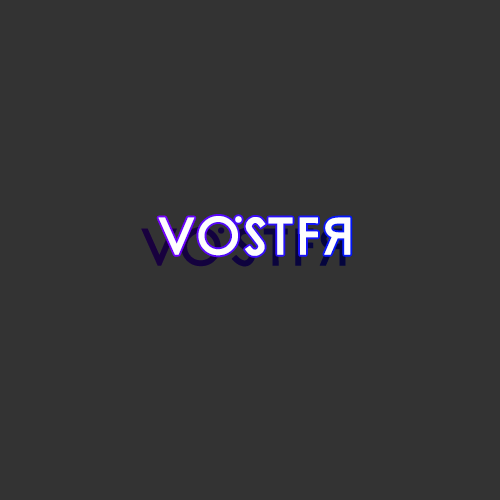
<style>
.page{position:relative;width:500px;height:500px;background:#333333}
.page>*{position:absolute;margin:0}
.t1{font:45.8px "FoundationLogo";letter-spacing:-0.25em;color:#fefefe;font-weight:bold}
</style>
<div class="page">
<p class="t1" style="left:158px;top:216px;width:193px;height:40px">VOSTFR</p>
</div>
